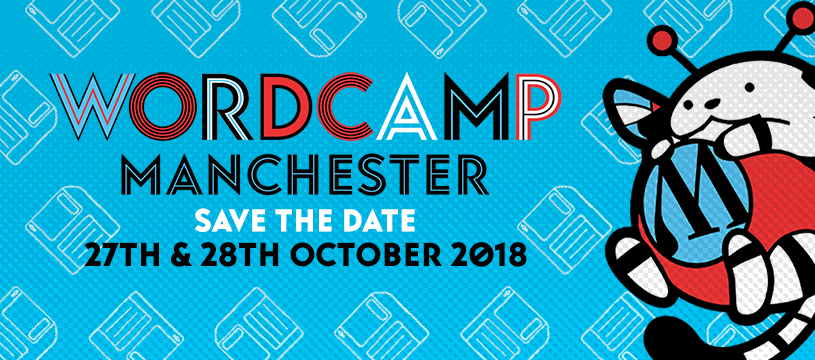
<style>
.page{position:relative;width:815px;height:360px;background:#00b0dc}
.page>*{position:absolute;margin:0}
.t1{font:31px "Baro-Plain";color:#ffffff}
.t2{font:32.5px "Baro-Plain";color:#020202}
</style>
<div class="page">
<p class="t1" style="left:195px;top:208px;width:220px;height:24px">save the date</p>
<p class="t2" style="left:84px;top:242px;width:443px;height:25px">27th &amp; 28th october 2018</p>
</div>
